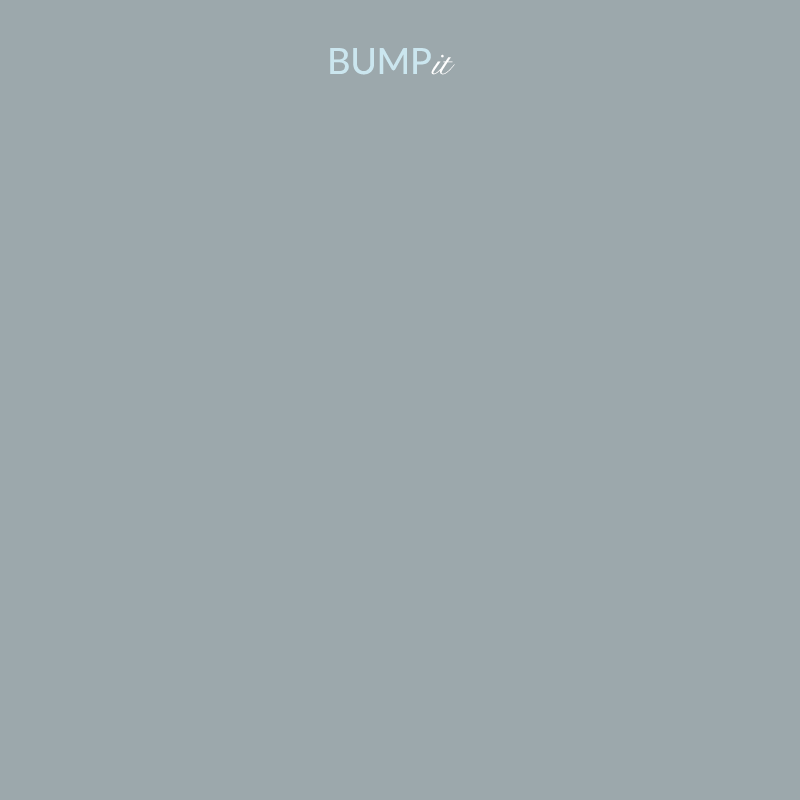
<style>
.page{position:relative;width:800px;height:800px;background:#9ca8ac}
.page>*{position:absolute;margin:0}
.t1{font:36px "Lato-Regular";color:#cbe6ef}
.t2{font:36px "SnellRoundhand";color:#fefefe}
</style>
<div class="page">
<p class="t1" style="left:330px;top:48px;width:125px;height:27px">BUMP<span class="t2">it</span></p>
</div>
